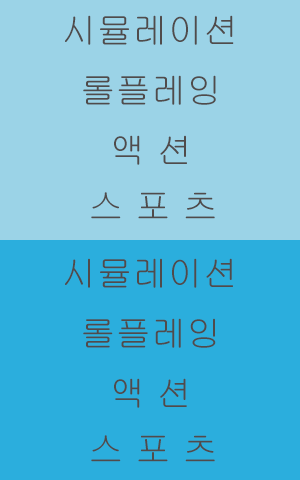
<style>
.page{position:relative;width:300px;height:480px;background:#2baedd}
.page>*{position:absolute;margin:0}
.t1{font:35.5px "Gulim";color:#504b4b}
</style>
<div class="page">
<p class="t1" style="left:65px;top:15px;width:169px;height:30px">시뮬레이션</p>
<p class="t1" style="left:83px;top:75px;width:133px;height:30px">롤플레잉</p>
<p class="t1" style="left:114px;top:135px;width:73px;height:30px">액 션</p>
<p class="t1" style="left:91px;top:192px;width:124px;height:27px">스 포 츠</p>
<p class="t1" style="left:65px;top:258px;width:168px;height:30px">시뮬레이션</p>
<p class="t1" style="left:83px;top:318px;width:133px;height:30px">롤플레잉</p>
<p class="t1" style="left:114px;top:378px;width:73px;height:30px">액 션</p>
<p class="t1" style="left:91px;top:435px;width:124px;height:27px">스 포 츠</p>
</div>
